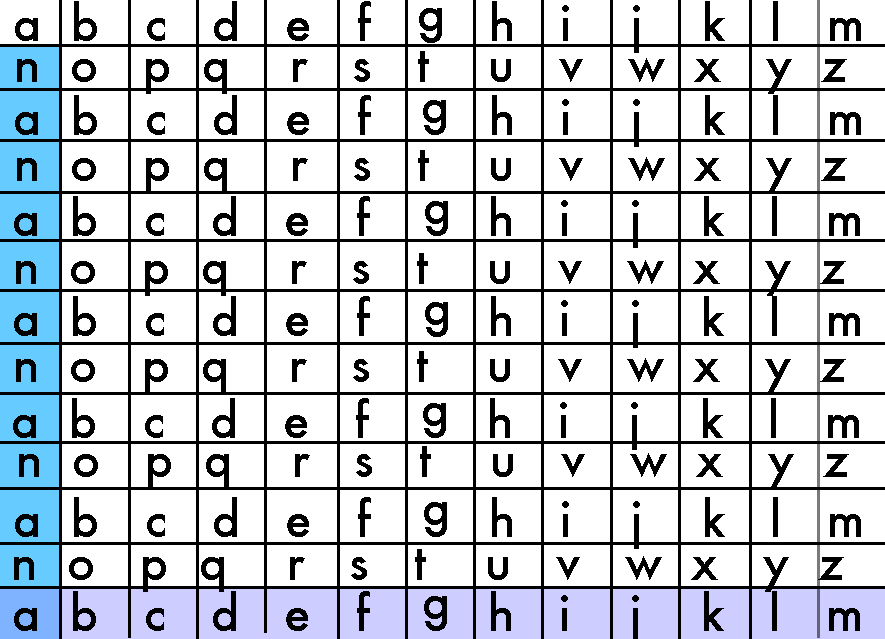
<style>
.page{position:relative;width:885px;height:639px;background:#ffffff}
.page>*{position:absolute;margin:0}
.t1{font:48px "Futura-Medium";color:#000000}
</style>
<div class="page">
<p class="t1" style="left:15px;top:1px;width:846px;height:52px">a  b   c   d   e   f        h   i    j    k   l   m</p>
<p class="t1" style="left:419px;top:8px;width:23px;height:35px">g</p>
<p class="t1" style="left:17px;top:51px;width:830px;height:43px">n  o   p  q    r   s   t    u   v   w  x   y  z</p>
<p class="t1" style="left:15px;top:95px;width:846px;height:52px">a  b   c   d   e   f        h   i    j    k   l   m</p>
<p class="t1" style="left:17px;top:150px;width:830px;height:43px">n  o   p  q    r   s   t    u   v   w  x   y  z</p>
<p class="t1" style="left:14px;top:196px;width:846px;height:52px">a  b   c   d   e   f        h   i    j    k   l   m</p>
<p class="t1" style="left:16px;top:253px;width:830px;height:43px">n  o   p  q    r   s   t    u   v   w  x   y  z</p>
<p class="t1" style="left:14px;top:296px;width:846px;height:52px">a  b   c   d   e   f        h   i    j    k   l   m</p>
<p class="t1" style="left:13px;top:398px;width:846px;height:52px">a  b   c   d   e   f        h   i    j    k   l   m</p>
<p class="t1" style="left:15px;top:497px;width:846px;height:52px">a  b   c   d   e   f        h   i    j    k   l   m</p>
</div>
